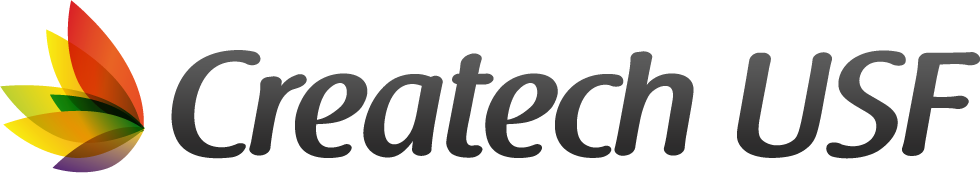
<style>
.page{position:relative;width:980px;height:173px;background:#ffffff}
.page>*{position:absolute;margin:0}
.t1{font:146.6px "RaspoutineDemiBold";color:#414040}
</style>
<div class="page">
<p class="t1" style="left:171px;top:50px;width:810px;height:109px">Createch USF</p>
</div>
